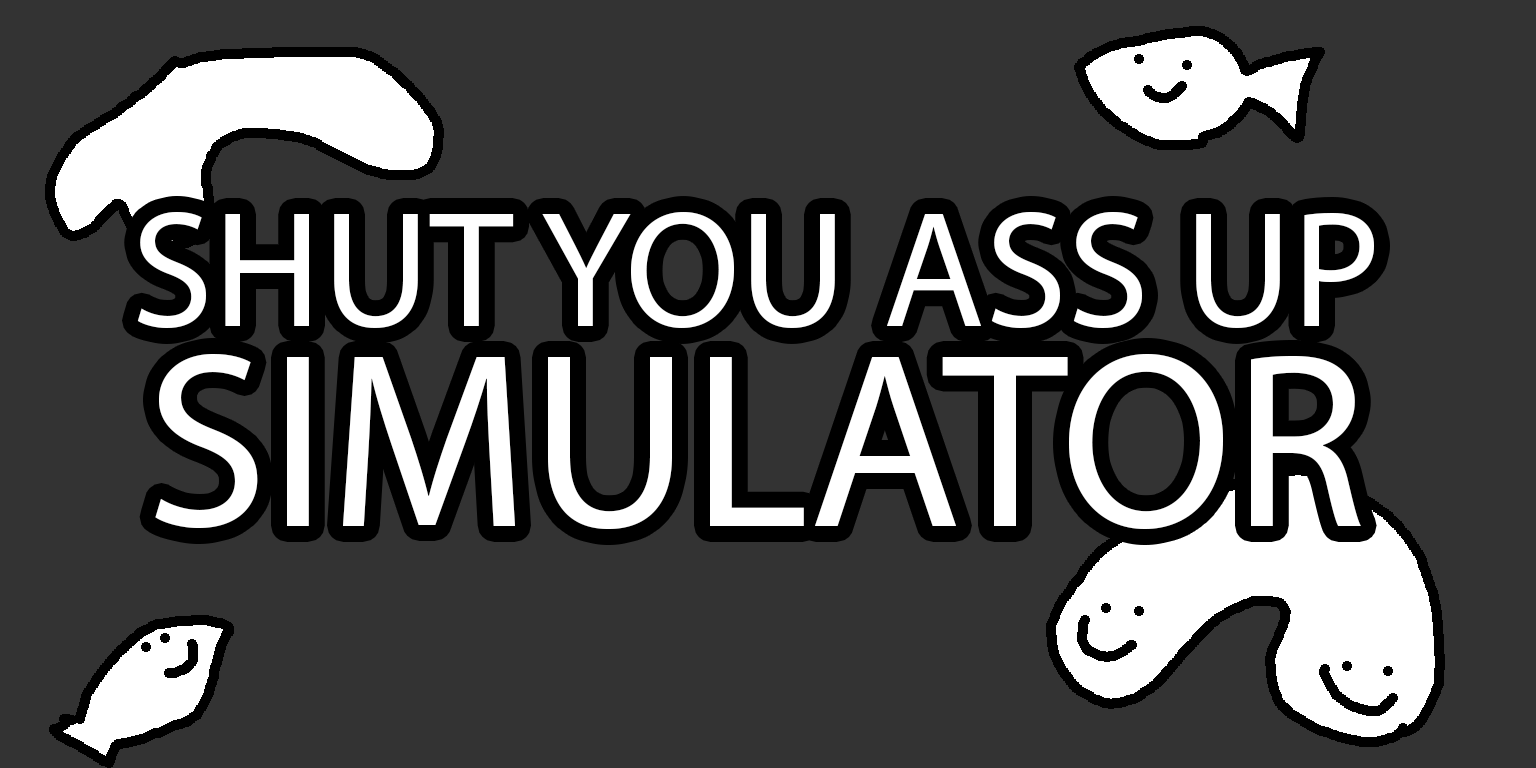
<style>
.page{position:relative;width:1536px;height:768px;background:#333333}
.page>*{position:absolute;margin:0}
.t1{font:166.7px/200px "MyriadPro-Regular";color:#ffffff}
.t2{font:250px/200px "MyriadPro-Regular";color:#ffffff}
</style>
<div class="page">
<p class="t1" style="left:137px;top:212px;width:1237px;height:317px;text-align:center">SHUT YOU ASS UP<br><span class="t2">SIMULATOR</span></p>
</div>
